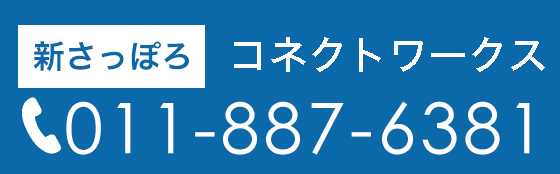
<style>
.page{position:relative;width:560px;height:174px;background:#0c69a9}
.page>*{position:absolute;margin:0}
.t1{font:32px "HiraKakuStd-W6";color:#0c69a9}
.t2{font:40px "HiraKakuStd-W5";color:#ffffff}
.t3{font:70px "CenturyGothic";letter-spacing:0.06em;color:#ffffff}
</style>
<div class="page">
<p class="t1" style="left:33px;top:41px;width:156px;height:30px">新さっぽろ</p>
<p class="t2" style="left:234px;top:37px;width:311px;height:35px">コネクトワークス</p>
<p class="t3" style="left:66px;top:101px;width:464px;height:54px">011-887-6381</p>
</div>
